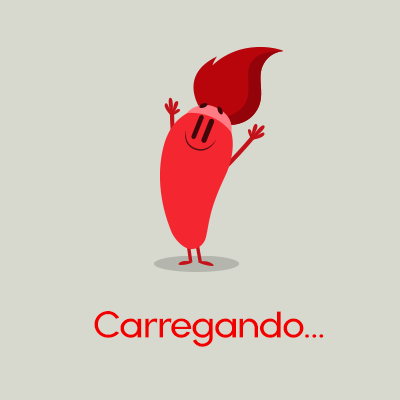
<style>
.page{position:relative;width:400px;height:400px;background:#d7d9ce}
.page>*{position:absolute;margin:0}
.t1{font:37.2px "Urbanist-SemiBold";letter-spacing:-0.02em;color:#f20000;scale:1.08 1}
</style>
<div class="page">
<p class="t1" style="left:94px;top:311px;width:230px;height:36px">Carregando...</p>
</div>
